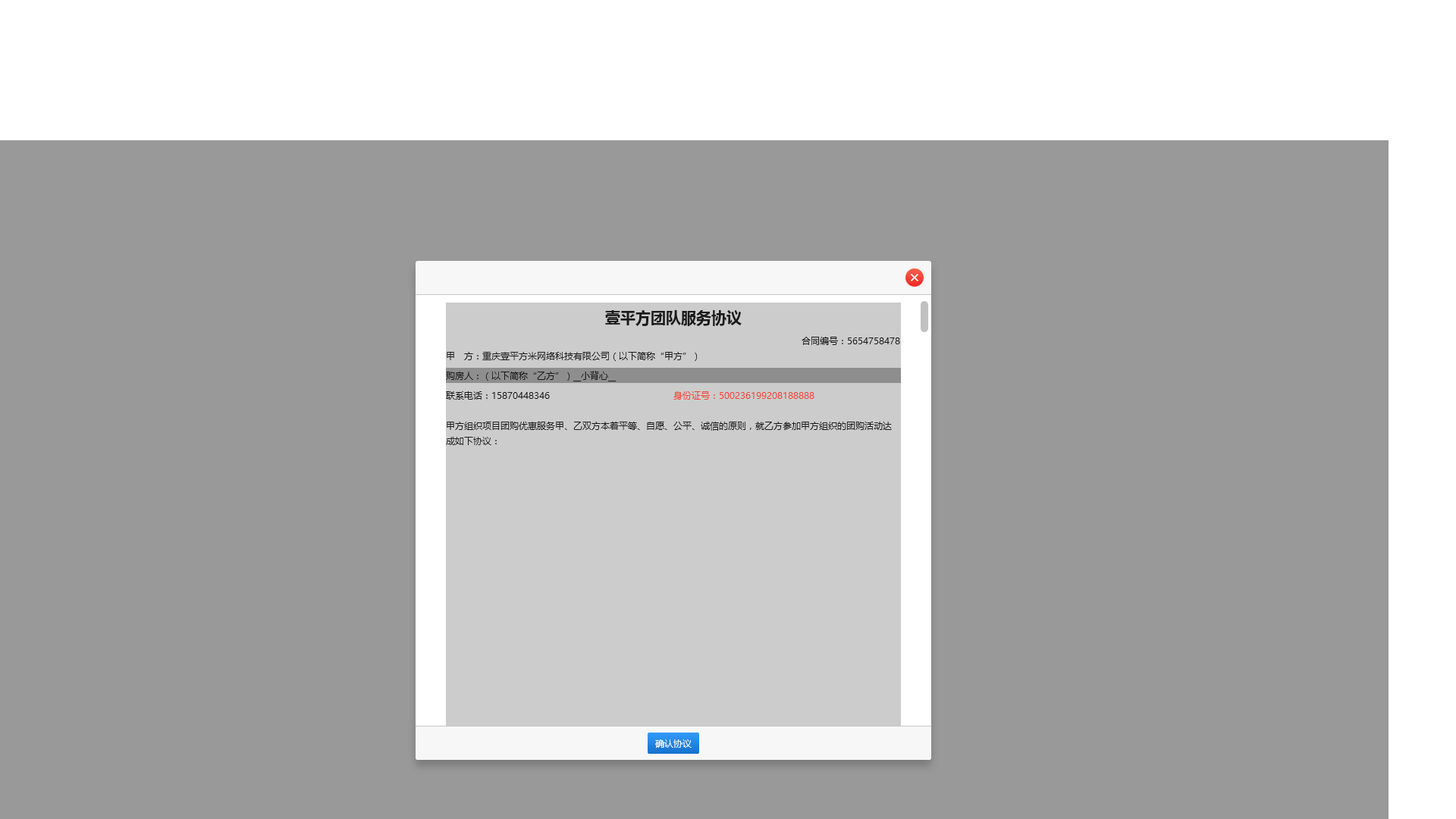
<style>
.page{position:relative;width:1456px;height:819px;background:#999999}
.page>*{position:absolute;margin:0}
.t1{font:16.7px "MicrosoftYaHei";color:#ffffff}
.t2{font:15.2px "MicrosoftYaHei-Bold";color:#1a1a1a}
.t3{font:9.1px "MicrosoftYaHei";color:#1a1a1a}
.t4{font:9.1px "MicrosoftYaHei";color:#f44336}
.t5{font:9.1px/15.2px "MicrosoftYaHei";color:#1a1a1a}
.t6{font:9.1px "MicrosoftYaHei";color:#ffffff}
</style>
<div class="page">
<p class="t1" style="left:910px;top:274px;width:8px;height:7px">×</p>
<p class="t2" style="left:605px;top:310px;width:137px;height:16px">壹平方团队服务协议</p>
<p class="t3" style="left:802px;top:337px;width:98px;height:8px">合同编号：5654758478</p>
<p class="t3" style="left:447px;top:352px;width:251px;height:9px">甲　方：重庆壹平方米网络科技有限公司（以下简称“甲方”）</p>
<p class="t3" style="left:446px;top:371px;width:171px;height:10px">购房人：（以下简称“乙方”）__小背心__</p>
<p class="t3" style="left:446px;top:391px;width:104px;height:9px">联系电话：15870448346</p>
<p class="t4" style="left:673px;top:391px;width:141px;height:9px">身份证号：500236199208188888</p>
<p class="t5" style="left:446px;top:422px;width:446px;height:23px">甲方组织项目团购优惠服务甲、乙双方本着平等、自愿、公平、诚信的原则，就乙方参加甲方组织的团购活动达成如下协议：</p>
<p class="t6" style="left:655px;top:739px;width:37px;height:9px">确认协议</p>
</div>
